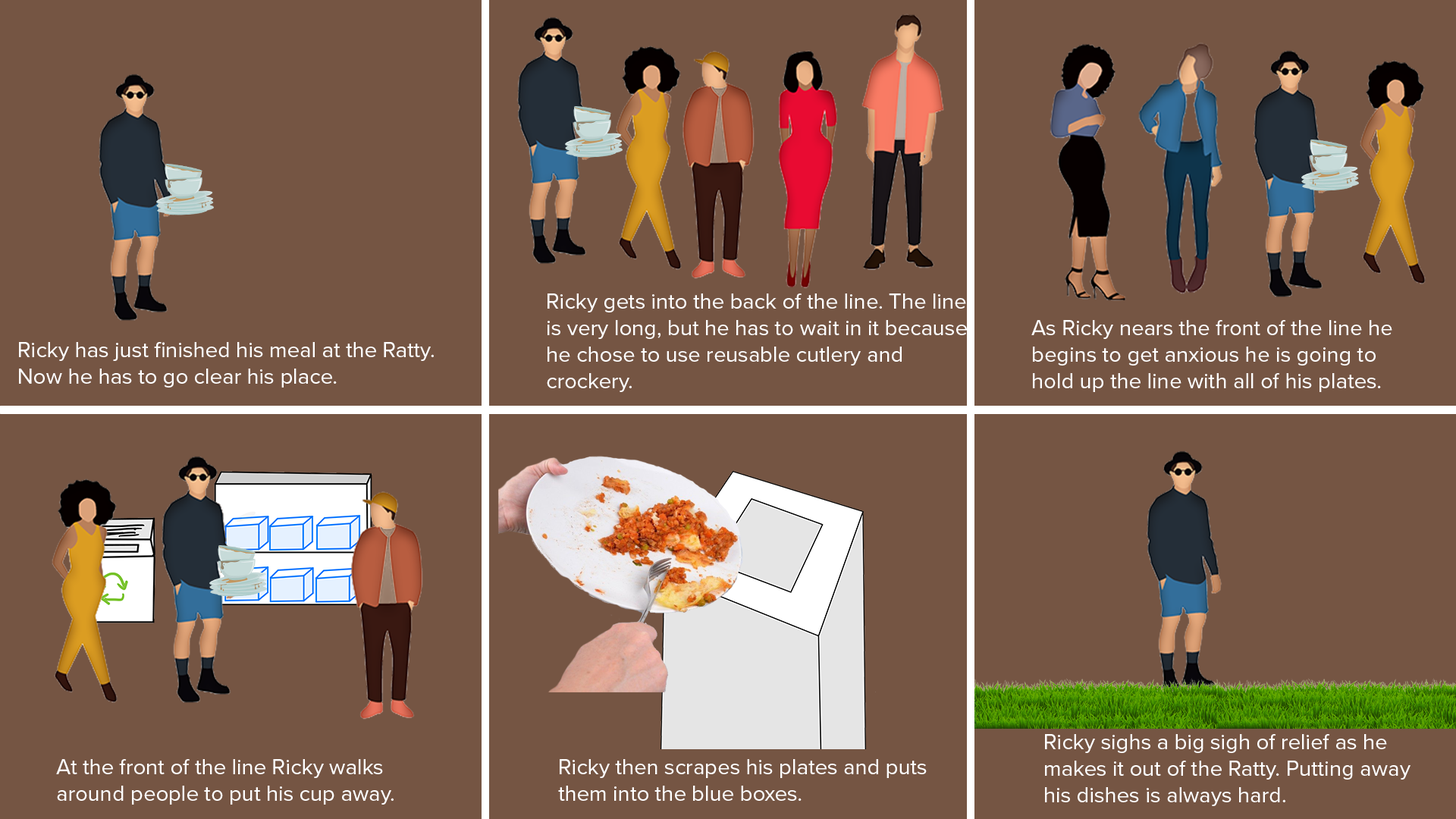
<style>
.page{position:relative;width:1456px;height:819px;background:#755543}
.page>*{position:absolute;margin:0}
.t1{font:22.1px "ProximaNova-Regular";color:#ffffff}
</style>
<div class="page">
<p class="t1" style="left:547px;top:293px;width:420px;height:99px">Ricky gets into the back of the line. The line is very long, but he has to wait in it because he chose to use reusable cutlery and crockery.</p>
<p class="t1" style="left:1031px;top:320px;width:361px;height:72px">As Ricky nears the front of the line he begins to get anxious he is going to hold up the line with all of his plates.</p>
<p class="t1" style="left:19px;top:342px;width:415px;height:46px">Ricky has just finished his meal at the Ratty. Now he has to go clear his place.</p>
<p class="t1" style="left:1045px;top:734px;width:365px;height:72px">Ricky sighs a big sigh of relief as he makes it out of the Ratty. Putting away his dishes is always hard.</p>
<p class="t1" style="left:56px;top:759px;width:338px;height:46px">At the front of the line Ricky walks around people to put his cup away.</p>
<p class="t1" style="left:558px;top:759px;width:369px;height:42px">Ricky then scrapes his plates and puts them into the blue boxes.</p>
</div>
